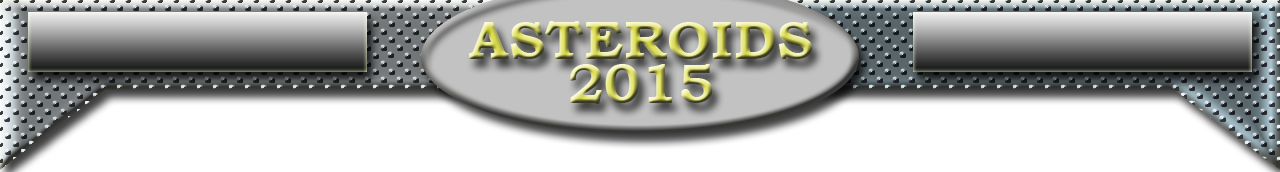
<style>
.page{position:relative;width:1280px;height:172px;background:#ffffff}
.page>*{position:absolute;margin:0}
.t1{font:55.4px "BookmanOldStyle-Bold"}
</style>
<div class="page">
<p class="t1" style="left:469px;top:21px;width:343px;height:38px">ASTEROIDS</p>
<p class="t1" style="left:570px;top:64px;width:143px;height:40px">2015</p>
</div>
